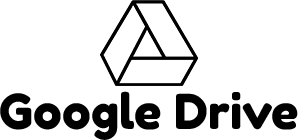
<style>
.page{position:relative;width:298px;height:140px;background:#ffffff}
.page>*{position:absolute;margin:0}
.t1{font:48px "FredokaOne-Regular";color:#000000}
</style>
<div class="page">
<p class="t1" style="left:0px;top:91px;width:298px;height:49px">Google Drive</p>
</div>
